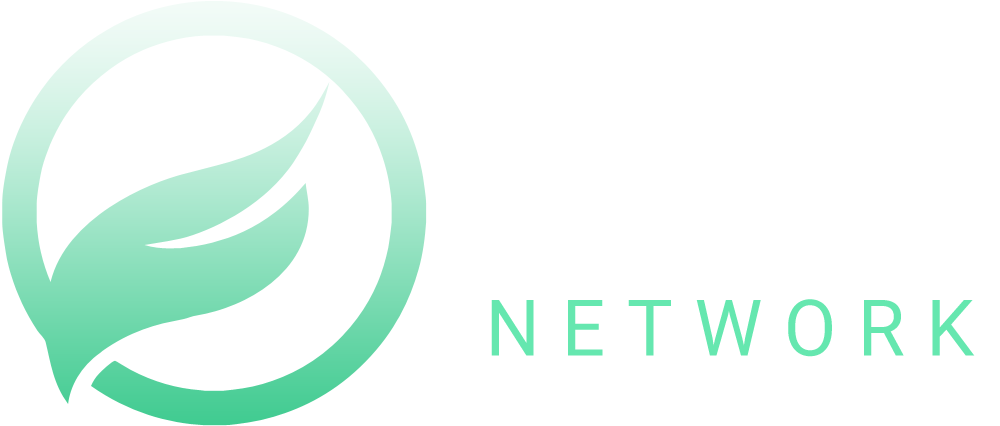
<style>
.page{position:relative;width:1000px;height:426px;background:#ffffff}
.page>*{position:absolute;margin:0}
.t1{font:77.9px "Roboto-Regular";letter-spacing:0.28em;color:#65e7af}
</style>
<div class="page">
<p class="t1" style="left:491px;top:299px;width:484px;height:58px">NETWORK</p>
</div>
